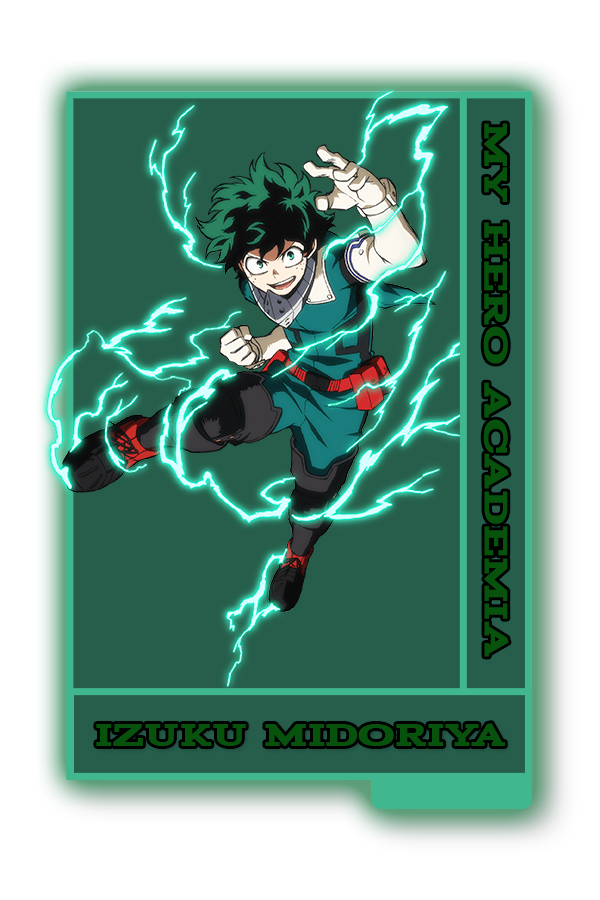
<style>
.page{position:relative;width:600px;height:900px;background:#265d4b}
.page>*{position:absolute;margin:0}
.t1{font:36.8px "Acknowledgement";color:#07530e}
.t2{font:35px "Acknowledgement";color:#07530e}
</style>
<div class="page">
<p class="t1" style="left:483px;top:123px;width:26px;height:534px;rotate:90deg">MY HERO ACADEMIA</p>
<p class="t2" style="left:96px;top:723px;width:409px;height:23px">IZUKU MIDORIYA</p>
</div>
